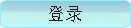
<style>
.page{position:relative;width:131px;height:28px}
.page>*{position:absolute;margin:0}
.t1{font:18px "SimSun";color:#1c1c1c;text-transform:uppercase}
</style>
<div class="page">
<p class="t1" style="left:49px;top:6px;width:33px;height:16px">登录</p>
</div>
